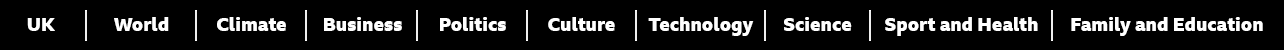
<style>
.page{position:relative;width:1284px;height:50px;background:#000000}
.page>*{position:absolute;margin:0}
.t1{font:18.8px "BBCReithSans-XBold";color:#ffffff}
</style>
<div class="page">
<p class="t1" style="left:114px;top:17px;width:55px;height:14px">World</p>
<p class="t1" style="left:217px;top:17px;width:69px;height:14px">Climate</p>
<p class="t1" style="left:324px;top:17px;width:78px;height:14px">Business</p>
<p class="t1" style="left:440px;top:17px;width:66px;height:14px">Politics</p>
<p class="t1" style="left:548px;top:17px;width:67px;height:14px">Culture</p>
<p class="t1" style="left:648px;top:17px;width:106px;height:19px">Technology</p>
<p class="t1" style="left:784px;top:17px;width:68px;height:14px">Science</p>
<p class="t1" style="left:885px;top:17px;width:153px;height:19px">Sport and Health</p>
<p class="t1" style="left:1071px;top:17px;width:192px;height:19px">Family and Education</p>
<p class="t1" style="left:27px;top:18px;width:28px;height:13px">UK</p>
</div>
